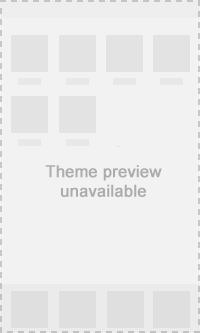
<style>
.page{position:relative;width:200px;height:333px;background:#f2f2f2}
.page>*{position:absolute;margin:0}
.t1{font:16.1px "ArialMT";color:#acacac;font-weight:bold}
</style>
<div class="page">
<p class="t1" style="left:45px;top:165px;width:117px;height:32px;text-align:center">Theme preview<br>unavailable</p>
</div>
